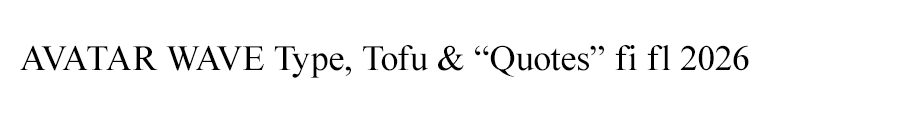
<style>
.page{position:relative;width:900px;height:120px;background:#ffffff}
.page>*{position:absolute;margin:0}
.t1{font:36px "TimesNewRomanPSMT";color:#000000}
</style>
<div class="page">
<p class="t1" style="left:20px;top:45px;width:729px;height:33px">AVATAR WAVE Type, Tofu &amp; “Quotes” fi fl 2026</p>
</div>
